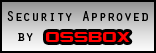
<style>
.page{position:relative;width:156px;height:53px}
.page>*{position:absolute;margin:0}
.t1{font:14px "OratorStd";color:#000000}
.t2{font:19.4px "Counter-StrikeRegular";color:#ff0000}
</style>
<div class="page">
<p class="t1" style="left:7px;top:11px;width:141px;height:10px">Security Approved</p>
<p class="t1" style="left:18px;top:33px;width:15px;height:8px">by</p>
<p class="t2" style="left:46px;top:32px;width:84px;height:10px">OSSBOX</p>
</div>
